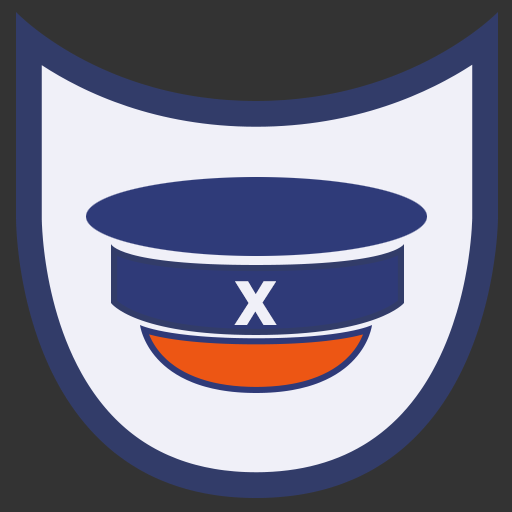
<style>
.page{position:relative;width:512px;height:512px;background:#f0f0f8}
.page>*{position:absolute;margin:0}
.t1{font:60px "Tahoma-Bold";color:#f0f0f8}
</style>
<div class="page">
<p class="t1" style="left:234px;top:281px;width:43px;height:44px">X</p>
</div>
